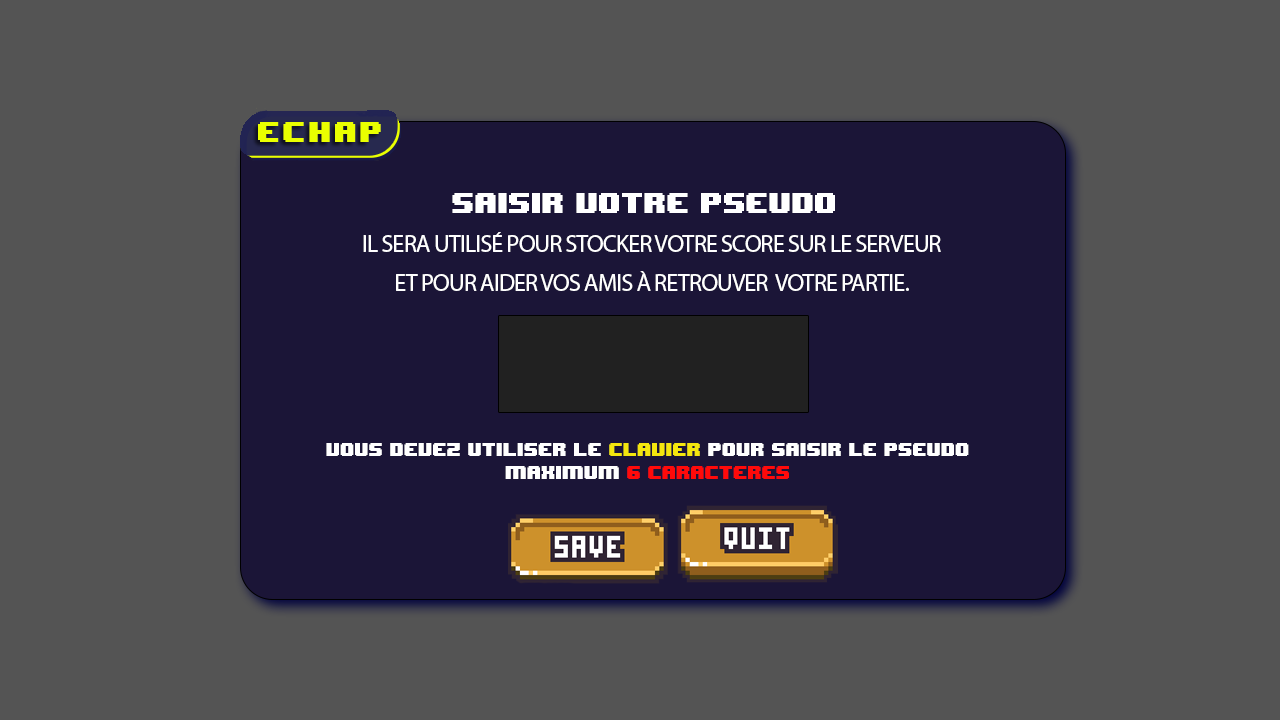
<style>
.page{position:relative;width:1280px;height:720px;background:#545454}
.page>*{position:absolute;margin:0}
.t1{font:24px/39px "MyriadPro-Regular";letter-spacing:-0.05em;color:#ffffff;text-transform:uppercase}
.t2{font:24px/39px "8BITWONDERNominal";letter-spacing:-0.05em;color:#ffffff;text-transform:uppercase}
.t3{font:15px/23px "8BITWONDERNominal";letter-spacing:-0.05em;color:#ffffff;text-transform:uppercase}
.t4{font:15px/23px "8BITWONDERNominal";letter-spacing:-0.05em;color:#f4e60e;text-transform:uppercase}
.t5{font:15px/23px "8BITWONDERNominal";letter-spacing:-0.05em;color:#ff0a0a;text-transform:uppercase}
</style>
<div class="page">
<p class="t1" style="left:363px;top:193px;width:578px;height:98px;text-align:center"><span class="t2">saisir votre pseudo </span><br>il sera utilisé pour stocker votre score sur le serveur<br>et pour aider vos amis à retrouver  votre partie.</p>
<p class="t3" style="left:326px;top:443px;width:643px;height:36px;text-align:center">Vous devez utiliser le <span class="t4">clavier </span>pour saisir le pseudo<br>Maximum <span class="t5">6 caracteres</span></p>
</div>
